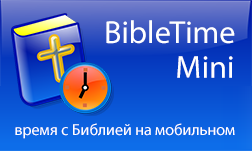
<style>
.page{position:relative;width:252px;height:151px}
.page>*{position:absolute;margin:0}
.t1{font:32px "MyriadPro-Regular";color:#ffffff}
.t2{font:16px "MyriadPro-Regular";color:#ffffff}
</style>
<div class="page">
<p class="t1" style="left:106px;top:20px;width:129px;height:24px">BibleTime</p>
<p class="t1" style="left:177px;top:56px;width:56px;height:22px">Mini</p>
<p class="t2" style="left:15px;top:123px;width:220px;height:16px">время с Библией на мобильном</p>
</div>
